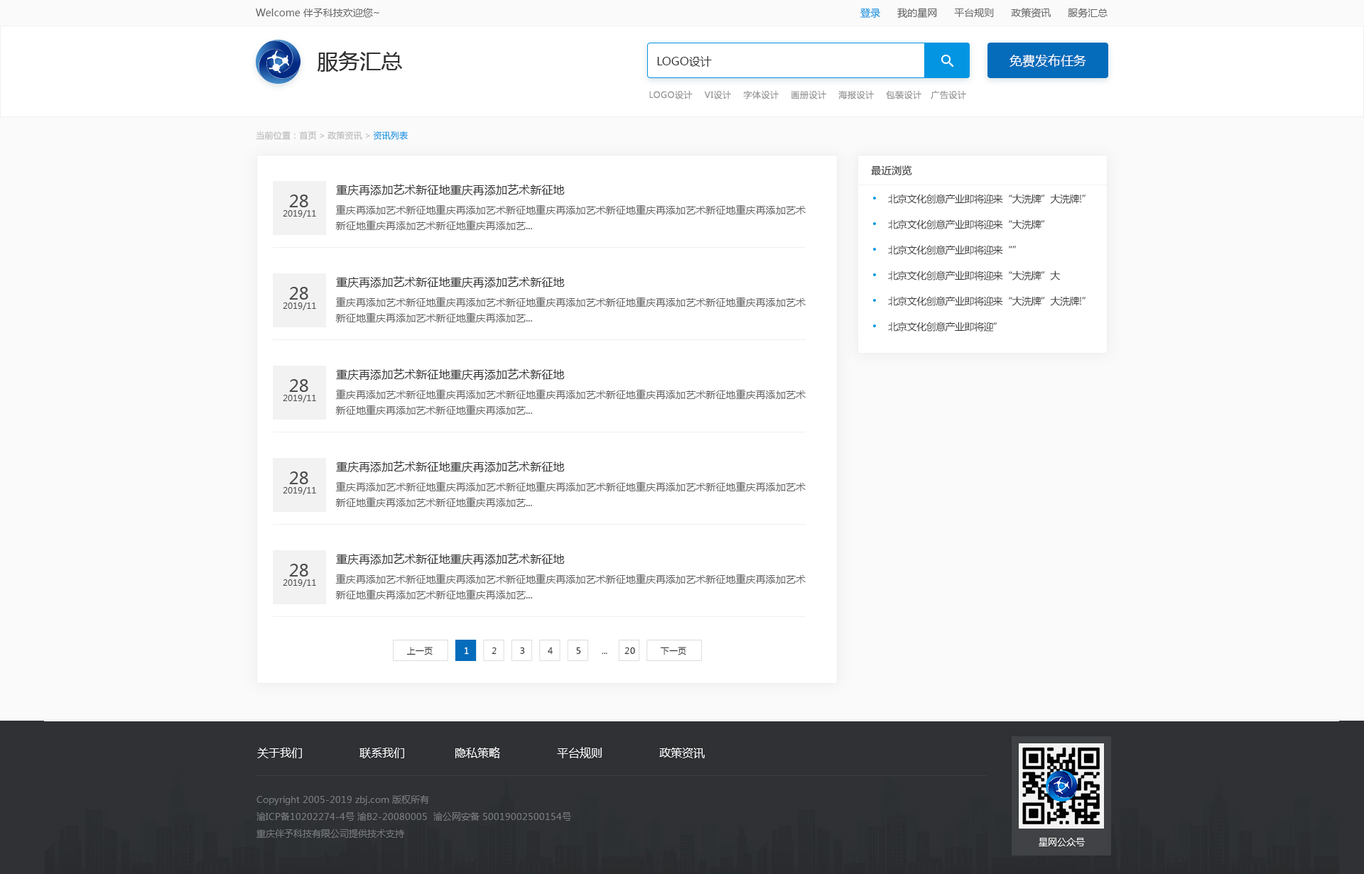
<style>
.page{position:relative;width:1364px;height:874px;background:#fafafa}
.page>*{position:absolute;margin:0}
.t1{font:9.9px "MicrosoftYaHei";color:#666666}
.t2{font:9.9px "MicrosoftYaHei";color:#0395e2}
.t3{font:21.3px "MicrosoftYaHei";color:#333333}
.t4{font:12.8px "MicrosoftYaHei";color:#ffffff;text-transform:uppercase}
.t5{font:11.4px "MicrosoftYaHei";color:#353535;text-transform:uppercase}
.t6{font:8.5px "MicrosoftYaHei";letter-spacing:0.05em;color:#999999;text-transform:uppercase}
.t7{font:8.5px "MicrosoftYaHei";color:#bbbbbb}
.t8{font:8.5px "MicrosoftYaHei";color:#0395e2}
.t9{font:9.9px "MicrosoftYaHei";color:#333333}
.t10{font:11.4px "MicrosoftYaHei";letter-spacing:0.005em;color:#333333}
.t11{font:17px "MicrosoftYaHei";letter-spacing:0.005em;color:#4e4e4e}
.t12{font:9.8px "MicrosoftYaHei";letter-spacing:-0.04em;color:#333333;text-transform:uppercase}
.t13{font:9.9px/15.6px "MicrosoftYaHei";letter-spacing:0.005em;color:#666666}
.t14{font:8.5px "MicrosoftYaHei";letter-spacing:0.005em;color:#4e4e4e}
.t15{font:8.5px "MicrosoftYaHei";letter-spacing:0.04em;color:#333333}
.t16{font:8.5px "MicrosoftYaHei";letter-spacing:0.04em;color:#ffffff}
</style>
<div class="page">
<p class="t1" style="left:256px;top:8px;width:123px;height:10px">Welcome 伴予科技欢迎您~</p>
<p class="t1" style="left:860px;top:8px;width:247px;height:10px"><span class="t2">登录 </span>     我的星网      平台规则      政策资讯      服务汇总</p>
<p class="t3" style="left:318px;top:51px;width:84px;height:21px">服务汇总</p>
<p class="t4" style="left:1009px;top:54px;width:77px;height:13px">免费发布任务</p>
<p class="t5" style="left:657px;top:56px;width:55px;height:11px">LOGO设计</p>
<p class="t6" style="left:649px;top:90px;width:317px;height:9px">LOGO设计    VI设计    字体设计    画册设计    海报设计    包装设计   广告设计</p>
<p class="t7" style="left:256px;top:131px;width:152px;height:9px">当前位置：首页 &gt; 政策资讯 &gt; <span class="t8">资讯列表</span></p>
<p class="t9" style="left:871px;top:165px;width:41px;height:11px">最近浏览</p>
<p class="t10" style="left:336px;top:184px;width:229px;height:11px">重庆再添加艺术新征地重庆再添加艺术新征地</p>
<p class="t11" style="left:289px;top:195px;width:19px;height:12px">28</p>
<p class="t12" style="left:888px;top:194px;width:197px;height:10px">北京文化创意产业即将迎来“大洗牌”大洗牌!”</p>
<p class="t13" style="left:335px;top:205px;width:470px;height:25px">重庆再添加艺术新征地重庆再添加艺术新征地重庆再添加艺术新征地重庆再添加艺术新征地重庆再添加艺术新征地重庆再添加艺术新征地重庆再添加艺...</p>
<p class="t14" style="left:283px;top:210px;width:33px;height:8px">2019/11</p>
<p class="t12" style="left:888px;top:219px;width:157px;height:10px">北京文化创意产业即将迎来“大洗牌”</p>
<p class="t12" style="left:888px;top:245px;width:128px;height:10px">北京文化创意产业即将迎来“”</p>
<p class="t10" style="left:336px;top:276px;width:229px;height:12px">重庆再添加艺术新征地重庆再添加艺术新征地</p>
<p class="t12" style="left:888px;top:271px;width:172px;height:10px">北京文化创意产业即将迎来“大洗牌”大</p>
<p class="t11" style="left:289px;top:287px;width:19px;height:13px">28</p>
<p class="t14" style="left:283px;top:303px;width:33px;height:7px">2019/11</p>
<p class="t13" style="left:335px;top:298px;width:470px;height:24px">重庆再添加艺术新征地重庆再添加艺术新征地重庆再添加艺术新征地重庆再添加艺术新征地重庆再添加艺术新征地重庆再添加艺术新征地重庆再添加艺...</p>
<p class="t12" style="left:888px;top:296px;width:197px;height:10px">北京文化创意产业即将迎来“大洗牌”大洗牌!”</p>
<p class="t12" style="left:888px;top:322px;width:109px;height:10px">北京文化创意产业即将迎”</p>
<p class="t10" style="left:336px;top:369px;width:229px;height:11px">重庆再添加艺术新征地重庆再添加艺术新征地</p>
<p class="t11" style="left:289px;top:379px;width:19px;height:13px">28</p>
<p class="t13" style="left:335px;top:390px;width:470px;height:25px">重庆再添加艺术新征地重庆再添加艺术新征地重庆再添加艺术新征地重庆再添加艺术新征地重庆再添加艺术新征地重庆再添加艺术新征地重庆再添加艺...</p>
<p class="t14" style="left:283px;top:395px;width:33px;height:8px">2019/11</p>
<p class="t10" style="left:336px;top:461px;width:229px;height:11px">重庆再添加艺术新征地重庆再添加艺术新征地</p>
<p class="t11" style="left:289px;top:472px;width:19px;height:12px">28</p>
<p class="t13" style="left:335px;top:482px;width:470px;height:25px">重庆再添加艺术新征地重庆再添加艺术新征地重庆再添加艺术新征地重庆再添加艺术新征地重庆再添加艺术新征地重庆再添加艺术新征地重庆再添加艺...</p>
<p class="t14" style="left:283px;top:487px;width:33px;height:8px">2019/11</p>
<p class="t10" style="left:336px;top:553px;width:229px;height:12px">重庆再添加艺术新征地重庆再添加艺术新征地</p>
<p class="t11" style="left:289px;top:564px;width:19px;height:13px">28</p>
<p class="t14" style="left:283px;top:580px;width:33px;height:7px">2019/11</p>
<p class="t13" style="left:335px;top:575px;width:470px;height:24px">重庆再添加艺术新征地重庆再添加艺术新征地重庆再添加艺术新征地重庆再添加艺术新征地重庆再添加艺术新征地重庆再添加艺术新征地重庆再添加艺...</p>
<p class="t15" style="left:406px;top:647px;width:27px;height:9px">上一页</p>
<p class="t16" style="left:465px;top:647px;width:4px;height:8px">1</p>
<p class="t15" style="left:492px;top:647px;width:4px;height:8px">2</p>
<p class="t15" style="left:520px;top:647px;width:5px;height:8px">3</p>
<p class="t15" style="left:548px;top:647px;width:5px;height:8px">4</p>
<p class="t15" style="left:576px;top:647px;width:5px;height:8px">5</p>
<p class="t15" style="left:602px;top:653px;width:5px;height:2px">...</p>
<p class="t15" style="left:624px;top:647px;width:11px;height:8px">20</p>
<p class="t15" style="left:661px;top:647px;width:25px;height:9px">下一页</p>
</div>
